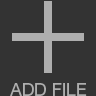
<style>
.page{position:relative;width:96px;height:96px;background:#333333}
.page>*{position:absolute;margin:0}
.t1{font:18px "HelveticaNeueLTStd-Roman";color:#aeaeae;text-transform:uppercase}
</style>
<div class="page">
<p class="t1" style="left:10px;top:83px;width:77px;height:13px">ADD FILE</p>
</div>
